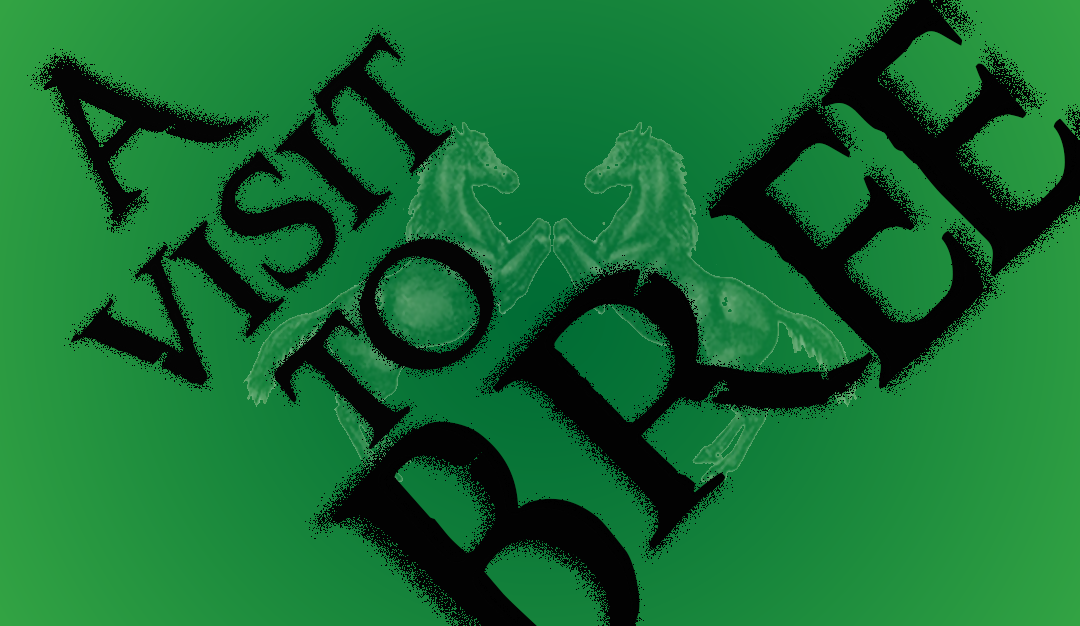
<style>
.page{position:relative;width:1080px;height:626px}
.page>*{position:absolute;margin:0}
.t1{font:198.8px "RingbearerMedium";color:#040404}
.t2{font:177.8px "RingbearerMedium";color:#040404}
</style>
<div class="page">
<p class="t1" style="left:70px;top:33px;width:381px;height:353px;rotate:-45deg">visit</p>
<p class="t2" style="left:43px;top:65px;width:199px;height:156px;rotate:-45deg">A</p>
<p class="t1" style="left:274px;top:239px;width:220px;height:211px;rotate:-45deg">to</p>
</div>
